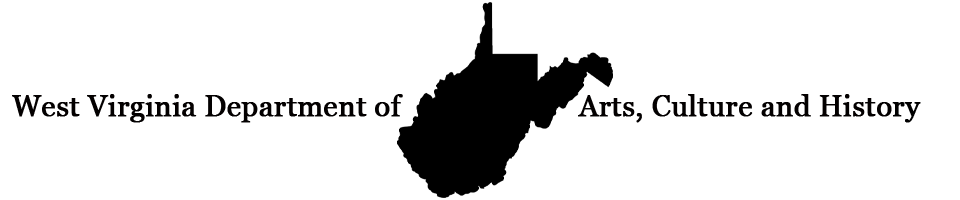
<style>
.page{position:relative;width:960px;height:200px;background:#ffffff}
.page>*{position:absolute;margin:0}
.t1{font:28.8px "Georgia";color:#030000;font-weight:bold}
.t2{font:28.8px "Georgia";color:#000000;font-weight:bold}
</style>
<div class="page">
<p class="t1" style="left:12px;top:94px;width:909px;height:29px">West Virginia Department of                       Arts, Culture and Histo<span class="t2">ry</span></p>
</div>
